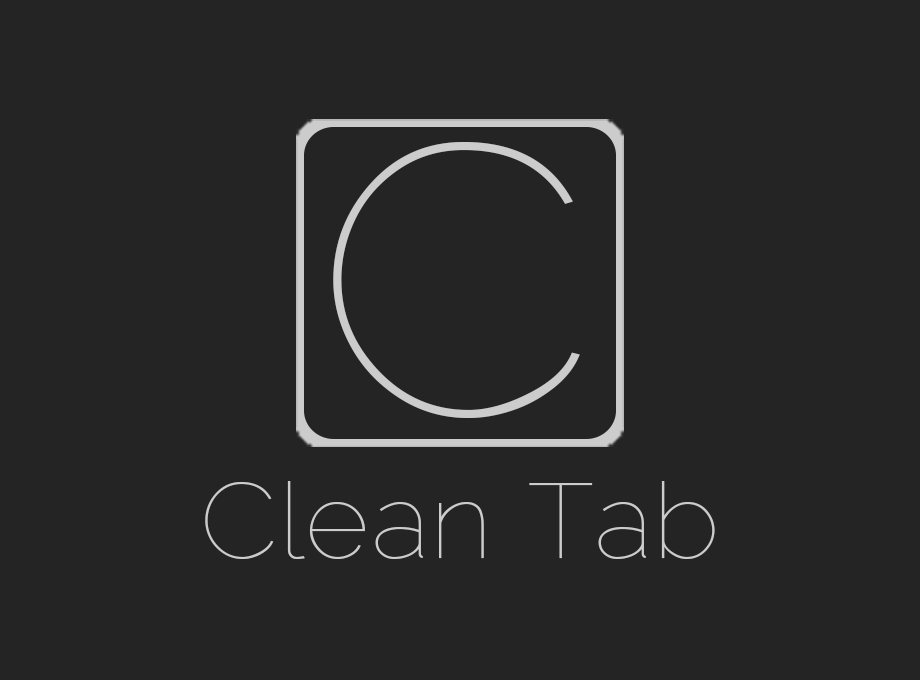
<style>
.page{position:relative;width:920px;height:680px;background:#242424}
.page>*{position:absolute;margin:0}
.t1{font:383.5px "Raleway-Thin";color:#cccccc;scale:1.05 1}
.t2{font:106px "Raleway-Thin";color:#cccccc;scale:1.05 1}
</style>
<div class="page">
<p class="t1" style="left:333px;top:142px;width:247px;height:276px">C</p>
<p class="t2" style="left:205px;top:481px;width:510px;height:78px">Clean Tab</p>
</div>
